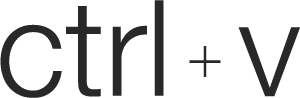
<style>
.page{position:relative;width:300px;height:98px;background:#ffffff}
.page>*{position:absolute;margin:0}
.t1{font:133.3px "HelveticaNeue-Light";color:#282829}
.t2{font:66.7px "OpenSans-Light";color:#282829}
</style>
<div class="page">
<p class="t1" style="left:0px;top:0px;width:164px;height:98px">ctrl</p>
<p class="t1" style="left:238px;top:27px;width:62px;height:70px">v</p>
<p class="t2" style="left:189px;top:46px;width:32px;height:31px">+</p>
</div>
